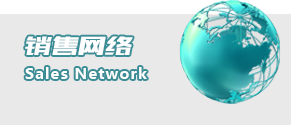
<style>
.page{position:relative;width:291px;height:125px;background:#e9e9e9}
.page>*{position:absolute;margin:0}
.t1{font:25px "MFBanHei_Noncommercial-Regular";letter-spacing:0.075em;color:#ffffff;text-transform:uppercase;font-style:italic}
.t2{font:15px "MicrosoftYaHei-Bold";letter-spacing:0.075em;color:#ffffff}
</style>
<div class="page">
<p class="t1" style="left:25px;top:36px;width:108px;height:19px">销售网络</p>
<p class="t2" style="left:25px;top:67px;width:122px;height:12px">Sales Network</p>
</div>
